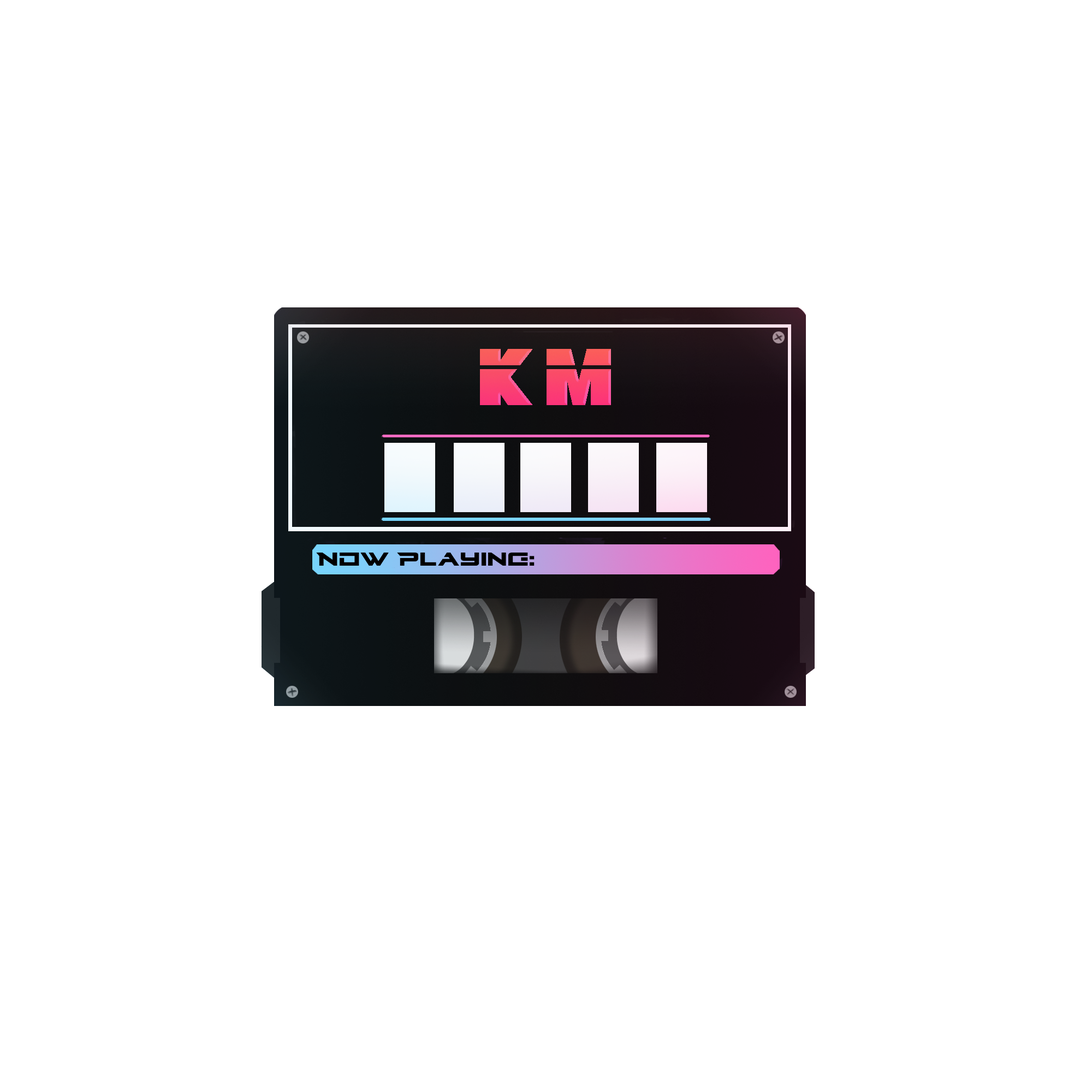
<style>
.page{position:relative;width:1092px;height:1092px;background:#ffffff}
.page>*{position:absolute;margin:0}
.t1{font:22.9px "Cyberdyne";color:#000000}
</style>
<div class="page">
<p class="t1" style="left:316px;top:553px;width:219px;height:13px">Now Playing:</p>
</div>
